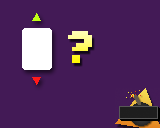
<style>
.page{position:relative;width:160px;height:128px;background:#431a56}
.page>*{position:absolute;margin:0}
.t1{font:64px "Lady-Radical"}
</style>
<div class="page">
<p class="t1" style="left:68px;top:31px;width:24px;height:32px">?</p>
</div>
